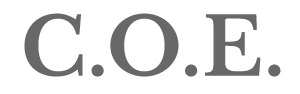
<style>
.page{position:relative;width:300px;height:94px;background:#ffffff}
.page>*{position:absolute;margin:0}
.t1{font:79.8px "LibreBaskerville-Bold";letter-spacing:0.01em;color:#686868}
</style>
<div class="page">
<p class="t1" style="left:24px;top:13px;width:257px;height:64px">C.O.E.</p>
</div>
